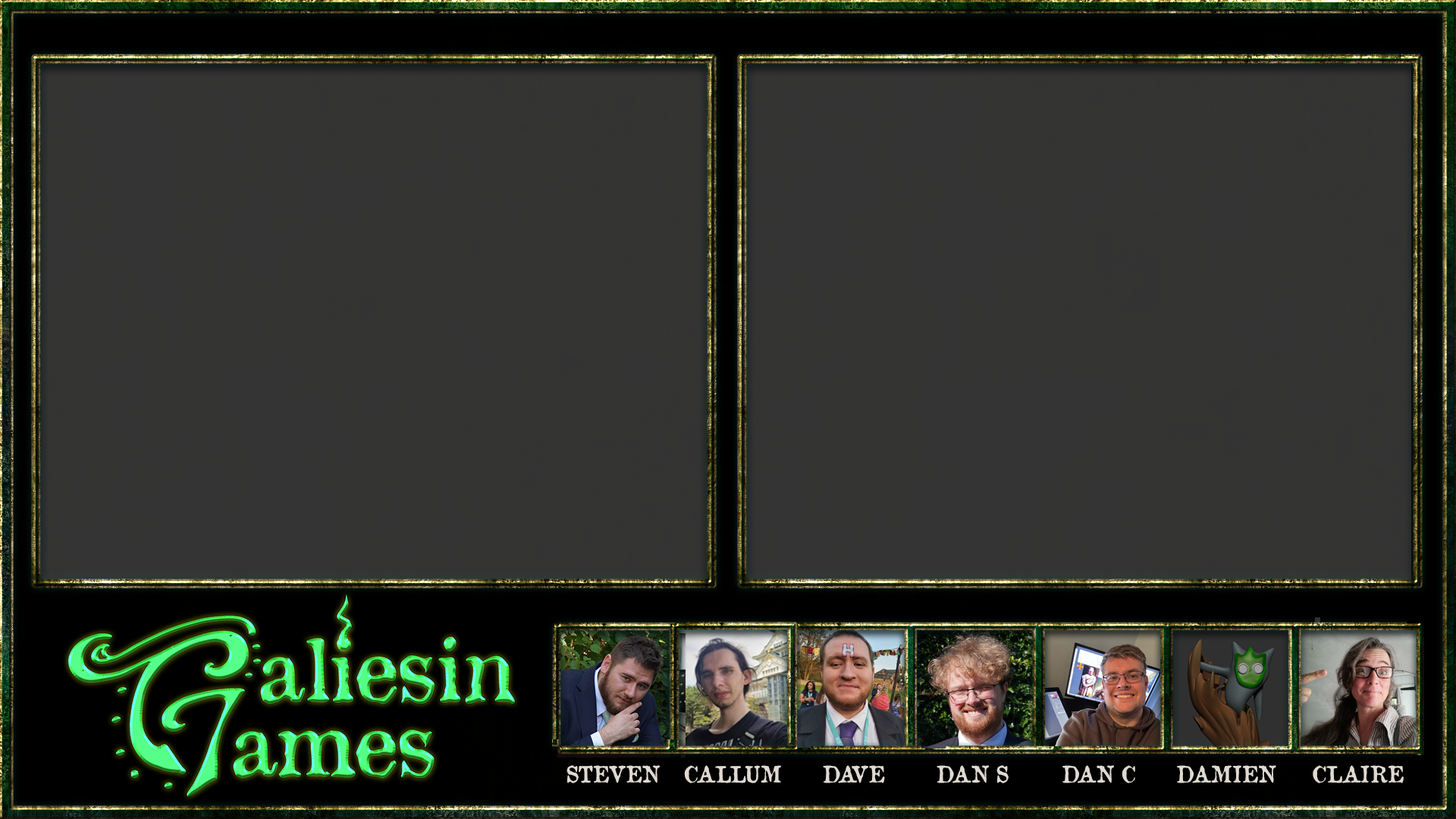
<style>
.page{position:relative;width:1456px;height:819px;background:#343433}
.page>*{position:absolute;margin:0}
.t1{font:22.4px "OldNewspaperTypes";letter-spacing:-0.025em;color:#e0d9d2}
</style>
<div class="page">
<p class="t1" style="left:566px;top:765px;width:94px;height:18px">STEVEN</p>
<p class="t1" style="left:684px;top:765px;width:97px;height:18px">CALLUM</p>
<p class="t1" style="left:823px;top:765px;width:62px;height:18px">DAVE</p>
<p class="t1" style="left:937px;top:765px;width:72px;height:18px">DAN S</p>
<p class="t1" style="left:1062px;top:765px;width:73px;height:18px">DAN C</p>
<p class="t1" style="left:1177px;top:765px;width:99px;height:18px">DAMIEN</p>
<p class="t1" style="left:1313px;top:765px;width:91px;height:18px">CLAIRE</p>
</div>
